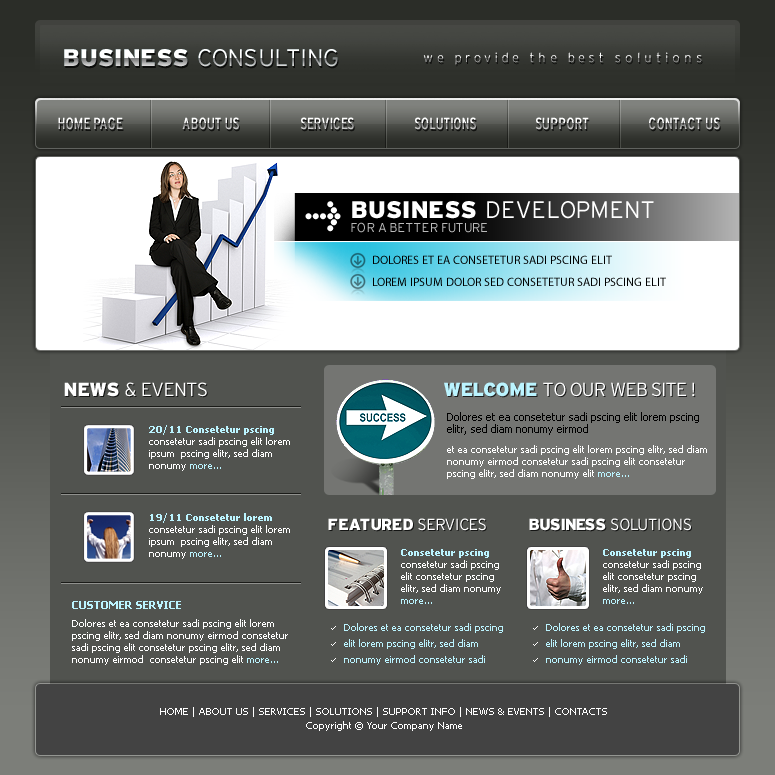
<style>
.page{position:relative;width:775px;height:775px;background:#51534f}
.page>*{position:absolute;margin:0}
.t1{font:24px "Interstate-Light"}
.t2{font:24px "Interstate-Black"}
.t3{font:13px "Interstate-Light";letter-spacing:0.3em}
.t4{font:16px "Interstate-RegularCondensed"}
.t5{font:28px "MetaCondBlack-Expert";color:#ffffff}
.t6{font:24px "Interstate-Light";color:#ffffff}
.t7{font:24px "Interstate-Black";color:#ffffff}
.t8{font:13px "Interstate-Light";color:#bababa}
.t9{font:12px "MyriadPro-Regular";color:#000000;text-transform:uppercase}
.t10{font:19px "Interstate-Light";letter-spacing:-0.04em;color:#ffffff}
.t11{font:19px "Interstate-Black";letter-spacing:-0.04em;color:#ffffff}
.t12{font:19px "Interstate-Black";letter-spacing:-0.04em;color:#bbf4ff}
.t13{font:10px/12px "Tahoma";color:#ffffff}
.t14{font:10px/12px "Tahoma-Bold";color:#bbf4ff}
.t15{font:10px/12px "Tahoma";color:#bbf4ff}
.t16{font:16px "Interstate-Black";letter-spacing:-0.04em;color:#ffffff}
.t17{font:16px "Interstate-Light";letter-spacing:-0.04em;color:#ffffff}
.t18{font:11px/14px "Tahoma-Bold";color:#bbf4ff}
.t19{font:10px/18px "Tahoma";color:#ffffff}
.t20{font:10px/16px "Tahoma";color:#bbf4ff}
.t21{font:10px/14px "Tahoma";color:#ffffff}
</style>
<div class="page">
<p class="t1" style="left:64px;top:49px;width:274px;height:18px"><span class="t2">BUSINESS </span>CONSULTING</p>
<p class="t3" style="left:423px;top:52px;width:279px;height:13px">we provide the best solutions</p>
<p class="t4" style="left:58px;top:117px;width:65px;height:13px">HOME PAGE</p>
<p class="t4" style="left:182px;top:117px;width:57px;height:13px">ABOUT US</p>
<p class="t4" style="left:300px;top:117px;width:54px;height:13px">SERVICES</p>
<p class="t4" style="left:414px;top:117px;width:62px;height:13px">SOLUTIONS</p>
<p class="t4" style="left:535px;top:117px;width:54px;height:13px">SUPPORT</p>
<p class="t4" style="left:649px;top:117px;width:71px;height:13px">CONTACT US</p>
<p class="t5" style="left:305px;top:201px;width:36px;height:31px">l</p>
<p class="t6" style="left:352px;top:201px;width:302px;height:18px"><span class="t7">BUSINESS </span>DEVELOPMENT</p>
<p class="t8" style="left:351px;top:222px;width:136px;height:11px">FOR A BETTER FUTURE</p>
<p class="t9" style="left:373px;top:255px;width:239px;height:9px">Dolores et ea consetetur sadi pscing elit</p>
<p class="t9" style="left:373px;top:277px;width:293px;height:9px">LOREM IPSUM DOLOR SED consetetur sadi pscing elit</p>
<p class="t10" style="left:64px;top:382px;width:143px;height:15px"><span class="t11">NEWS </span>&amp; EVENTS</p>
<p class="t10" style="left:444px;top:382px;width:251px;height:15px"><span class="t12">WELCOME </span>TO OUR WEB SITE !</p>
<p class="t13" style="left:149px;top:425px;width:141px;height:46px"><span class="t14">20/11 Consetetur pscing <br></span>consetetur sadi pscing elit lorem  ipsum  pscing elitr, sed diam nonumy<span class="t15"> more...</span></p>
<p class="t13" style="left:149px;top:513px;width:141px;height:46px"><span class="t14">19/11 Consetetur lorem <br></span>consetetur sadi pscing elit lorem  ipsum  pscing elitr, sed diam nonumy<span class="t15"> more...</span></p>
<p class="t16" style="left:328px;top:518px;width:158px;height:13px">FEATURED <span class="t17">SERVICES</span></p>
<p class="t17" style="left:529px;top:518px;width:162px;height:13px"><span class="t16">BUSINESS </span>SOLUTIONS</p>
<p class="t13" style="left:401px;top:549px;width:100px;height:55px"><span class="t14">Consetetur pscing <br></span>consetetur sadi pscing elit consetetur pscing elitr, sed diam nonumy <span class="t15">more...</span></p>
<p class="t13" style="left:603px;top:549px;width:100px;height:55px"><span class="t14">Consetetur pscing <br></span>consetetur sadi pscing elit consetetur pscing elitr, sed diam nonumy <span class="t15">more...</span></p>
<p class="t13" style="left:72px;top:601px;width:216px;height:64px"><span class="t18">CUSTOMER SERVICE<br></span><span class="t19">Dolores et ea consetetur sadi pscing elit lorem </span>pscing elitr, sed diam nonumy eirmod consetetur sadi pscing elit consetetur pscing elitr, sed diam nonumy eirmod  consetetur pscing elit <span class="t15">more...</span></p>
<p class="t20" style="left:344px;top:623px;width:159px;height:42px">Dolores et ea consetetur sadi pscing elit lorem pscing elitr, sed diam nonumy eirmod consetetur sadi</p>
<p class="t20" style="left:546px;top:623px;width:159px;height:42px">Dolores et ea consetetur sadi pscing elit lorem pscing elitr, sed diam nonumy eirmod consetetur sadi</p>
<p class="t21" style="left:160px;top:707px;width:447px;height:24px;text-align:center">HOME | ABOUT US | SERVICES | SOLUTIONS | SUPPORT INFO | NEWS &amp; EVENTS | CONTACTS<br>Copyright © Your Company Name</p>
</div>
